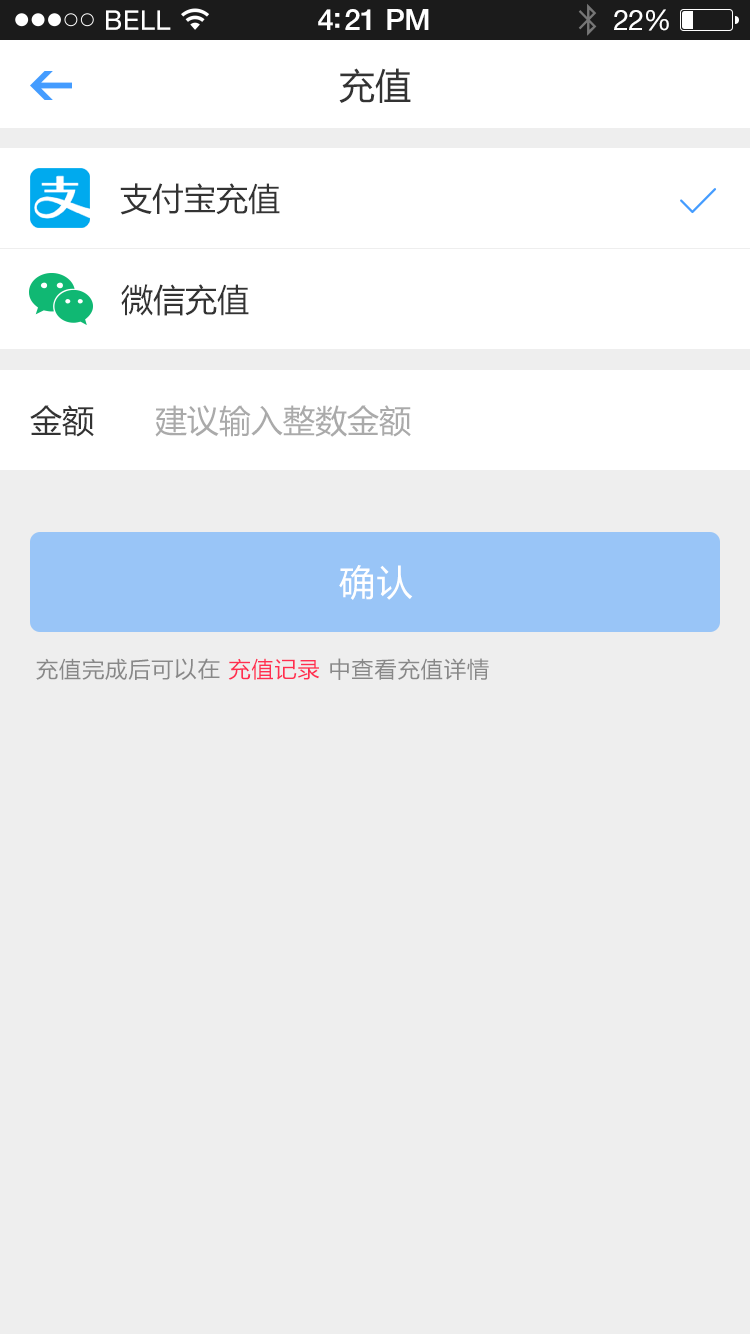
<style>
.page{position:relative;width:750px;height:1334px;background:#eeeeee}
.page>*{position:absolute;margin:0}
.t1{font:36px "MicrosoftYaHei";color:#333333}
.t2{font:32px "MicrosoftYaHei";color:#333333}
.t3{font:32px "MicrosoftYaHei";color:#aaaaaa}
.t4{font:36px "MicrosoftYaHei";letter-spacing:0.05em;color:#ffffff}
.t5{font:22px "MicrosoftYaHei";letter-spacing:0.05em;color:#888888}
.t6{font:22px "MicrosoftYaHei";letter-spacing:0.05em;color:#ff2e50}
</style>
<div class="page">
<p class="t1" style="left:339px;top:68px;width:72px;height:35px">充值</p>
<p class="t2" style="left:120px;top:183px;width:160px;height:32px">支付宝充值</p>
<p class="t2" style="left:121px;top:284px;width:128px;height:32px">微信充值</p>
<p class="t2" style="left:30px;top:405px;width:64px;height:32px">金额</p>
<p class="t3" style="left:155px;top:405px;width:256px;height:32px">建议输入整数金额</p>
<p class="t4" style="left:339px;top:565px;width:74px;height:35px">确认</p>
<p class="t5" style="left:36px;top:658px;width:453px;height:22px">充值完成后可以在 <span class="t6">充值记录</span> 中查看充值详情</p>
</div>
